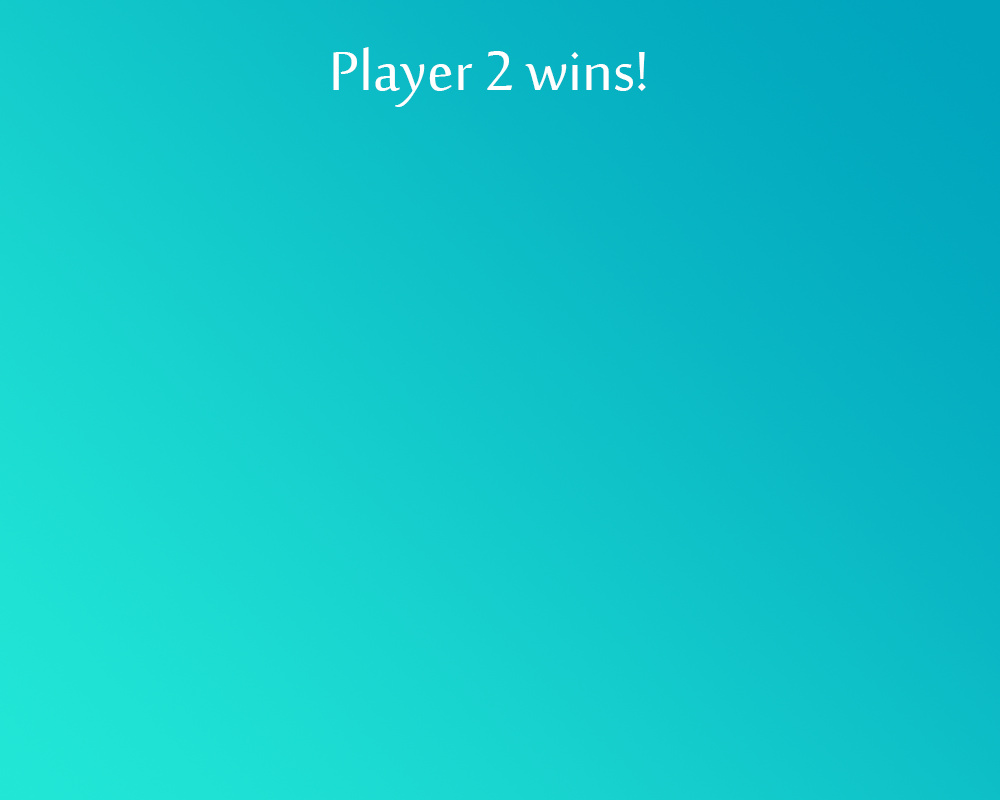
<style>
.page{position:relative;width:1000px;height:800px}
.page>*{position:absolute;margin:0}
.t1{font:75px "SakkalMajalla";color:#ffffff}
</style>
<div class="page">
<p class="t1" style="left:333px;top:47px;width:313px;height:60px">Player 2 wins!</p>
</div>
